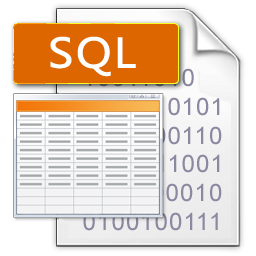
<style>
.page{position:relative;width:256px;height:256px}
.page>*{position:absolute;margin:0}
.t1{font:40px "MicrosoftYaHei";letter-spacing:0.025em;color:#ffffff;font-weight:bold;scale:1.1 1}
</style>
<div class="page">
<p class="t1" style="left:50px;top:36px;width:86px;height:41px">SQL</p>
</div>
